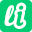
<style>
.page{position:relative;width:32px;height:32px;background:#00cc73}
.page>*{position:absolute;margin:0}
.t1{font:28.3px "NautilusPompilius";color:#ffffff}
.t2{font:28.3px "NautilusPompilius";color:#00cc73}
</style>
<div class="page">
<p class="t1" style="left:4px;top:5px;width:11px;height:21px">l</p>
<p class="t2" style="left:16px;top:5px;width:8px;height:21px">i</p>
</div>
